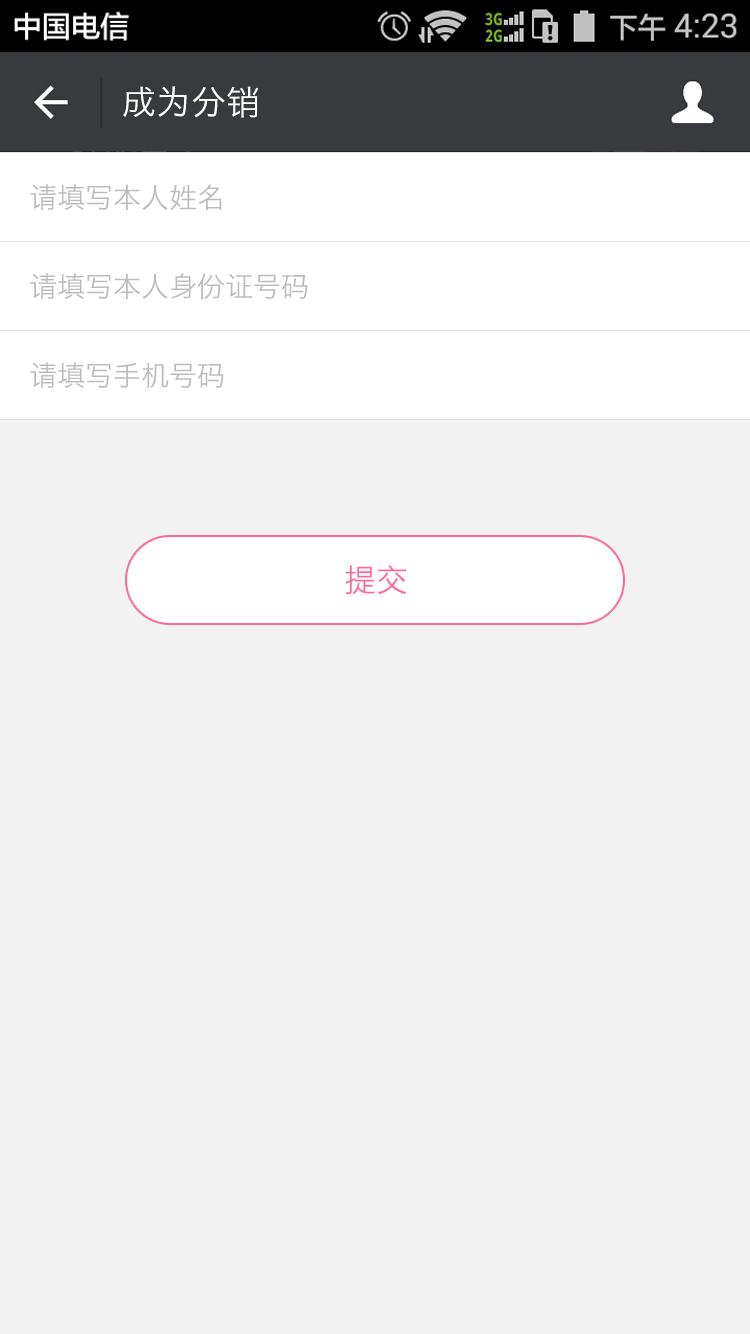
<style>
.page{position:relative;width:750px;height:1334px;background:#f2f2f2}
.page>*{position:absolute;margin:0}
.t1{font:34px "HiraginoSansGB-W3";letter-spacing:0.022em;color:#ffffff}
.t2{font:28px "HiraginoSansGB-W3";color:#bbbbbb}
.t3{font:32px "HiraginoSansGB-W3";color:#ff6699}
</style>
<div class="page">
<p class="t1" style="left:123px;top:86px;width:136px;height:32px">成为分销</p>
<p class="t2" style="left:30px;top:184px;width:192px;height:26px">请填写本人姓名</p>
<p class="t2" style="left:30px;top:273px;width:278px;height:26px">请填写本人身份证号码</p>
<p class="t2" style="left:30px;top:362px;width:194px;height:26px">请填写手机号码</p>
<p class="t3" style="left:345px;top:565px;width:62px;height:30px">提交</p>
</div>
